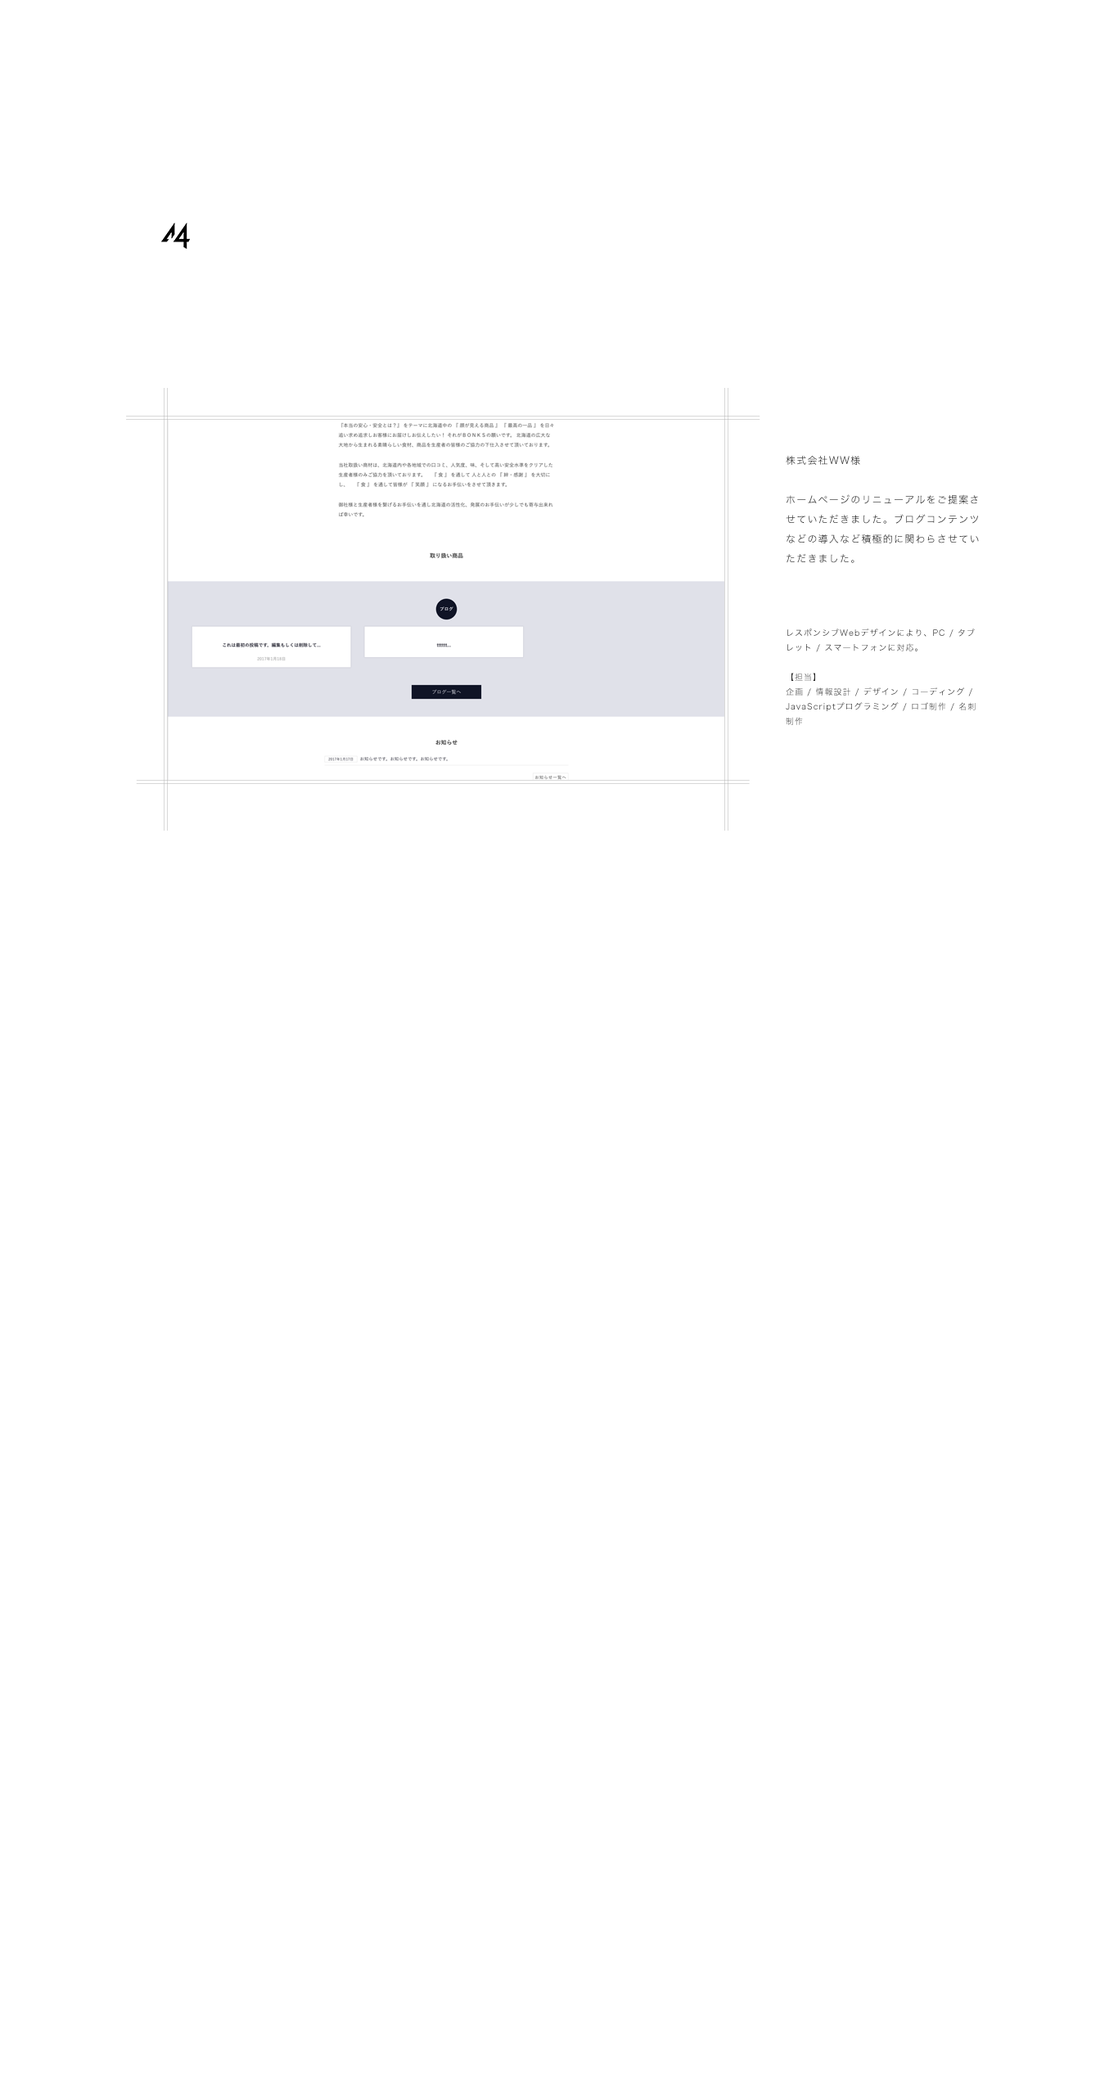
<style>
.page{position:relative;width:1118px;height:2095px;background:#ffffff}
.page>*{position:absolute;margin:0}
.t1{font:9.8px/19.6px "HiraKakuProN-W3";letter-spacing:0.1em;color:#262626}
.t2{font:8.2px/14.7px "HiraKakuProN-W3";letter-spacing:0.1em;color:#262626}
</style>
<div class="page">
<p class="t1" style="left:785px;top:456px;width:194px;height:107px">株式会社WW様<br><br>ホームページのリニューアルをご提案させていただきました。ブログコンテンツなどの導入など積極的に関わらさせていただきました。</p>
<p class="t2" style="left:785px;top:628px;width:190px;height:97px">レスポンシブWebデザインにより、PC / タブレット / スマートフォンに対応。<br><br>【担当】<br>企画 / 情報設計 / デザイン / コーディング / JavaScriptプログラミング / ロゴ制作 / 名刺制作</p>
</div>
